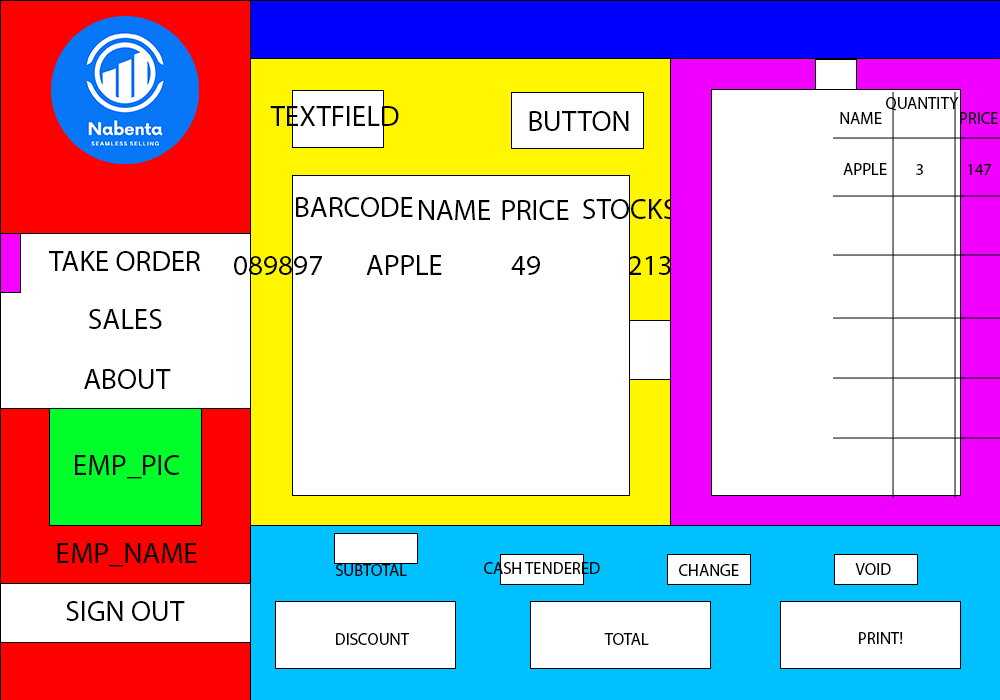
<style>
.page{position:relative;width:1000px;height:700px;background:#ffffff}
.page>*{position:absolute;margin:0}
.t1{font:16.7px "MyriadPro-Regular";color:#000000;text-transform:uppercase}
.t2{font:29.2px "MyriadPro-Regular";color:#000000;text-transform:uppercase}
</style>
<div class="page">
<p class="t1" style="left:886px;top:97px;width:73px;height:14px">quantity</p>
<p class="t2" style="left:270px;top:106px;width:129px;height:20px">textfield</p>
<p class="t2" style="left:529px;top:111px;width:100px;height:20px">button</p>
<p class="t1" style="left:840px;top:112px;width:42px;height:12px">name</p>
<p class="t1" style="left:960px;top:112px;width:38px;height:12px">price</p>
<p class="t1" style="left:843px;top:163px;width:149px;height:12px">Apple        3            147</p>
<p class="t2" style="left:296px;top:197px;width:117px;height:20px">barcode</p>
<p class="t2" style="left:419px;top:200px;width:71px;height:20px">name</p>
<p class="t2" style="left:502px;top:200px;width:67px;height:20px">price</p>
<p class="t2" style="left:583px;top:199px;width:93px;height:20px">stocks</p>
<p class="t2" style="left:49px;top:251px;width:152px;height:20px">take order</p>
<p class="t2" style="left:234px;top:255px;width:437px;height:20px">089897       apple           49              213</p>
<p class="t2" style="left:89px;top:309px;width:73px;height:20px">sales</p>
<p class="t2" style="left:84px;top:369px;width:87px;height:20px">about</p>
<p class="t2" style="left:75px;top:455px;width:105px;height:24px">emp_pic</p>
<p class="t2" style="left:57px;top:543px;width:140px;height:24px">emp_name</p>
<p class="t1" style="left:335px;top:564px;width:72px;height:12px">subtotal</p>
<p class="t1" style="left:484px;top:562px;width:116px;height:12px">cash tendered</p>
<p class="t1" style="left:679px;top:564px;width:60px;height:12px">change</p>
<p class="t1" style="left:855px;top:563px;width:36px;height:12px">void</p>
<p class="t2" style="left:66px;top:601px;width:119px;height:20px">Sign out</p>
<p class="t1" style="left:336px;top:633px;width:74px;height:12px">discount</p>
<p class="t1" style="left:604px;top:633px;width:45px;height:12px">total</p>
<p class="t1" style="left:859px;top:632px;width:44px;height:12px">print!</p>
</div>
